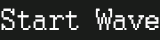
<style>
.page{position:relative;width:160px;height:40px;background:#1a1c1a}
.page>*{position:absolute;margin:0}
.t1{font:33.9px "Courier";color:#ffffff;scale:0.84 1}
</style>
<div class="page">
<p class="t1" style="left:1px;top:8px;width:158px;height:22px">Start Wave</p>
</div>
